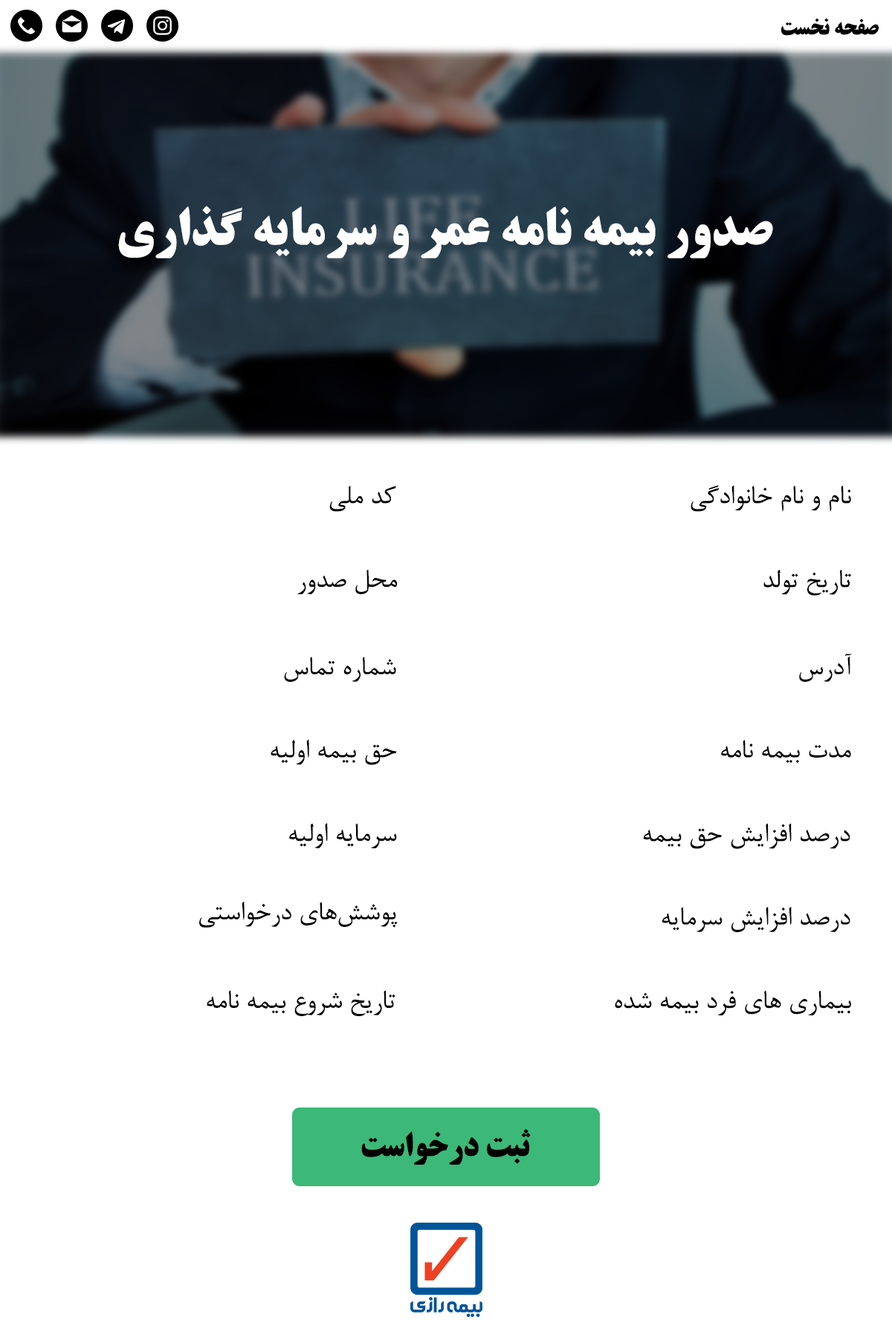
<style>
.page{position:relative;width:892px;height:1337px;background:#ffffff}
.page>*{position:absolute;margin:0}
.t1{font:22.3px "BTitrBold";color:#000000}
.t2{font:52px "BTitrBold";color:#ffffff}
.t3{font:29.7px "BNazanin";color:#000000}
.t4{font:33.4px "BTitrBold";color:#000000}
</style>
<div class="page">
<p class="t1" style="left:781px;top:18px;width:98px;height:18px">صفحه نخست</p>
<p class="t2" style="left:118px;top:206px;width:655px;height:53px">صدور بیمه نامه عمر و سرمایه گذاری</p>
<p class="t3" style="left:329px;top:485px;width:67px;height:27px">کد ملی</p>
<p class="t3" style="left:690px;top:485px;width:161px;height:27px">نام و نام خانوادگی</p>
<p class="t3" style="left:297px;top:569px;width:101px;height:25px">محل صدور</p>
<p class="t3" style="left:763px;top:569px;width:88px;height:27px">تاریخ تولد</p>
<p class="t3" style="left:799px;top:654px;width:52px;height:28px">آدرس</p>
<p class="t3" style="left:284px;top:657px;width:112px;height:25px">شماره تماس</p>
<p class="t3" style="left:270px;top:739px;width:127px;height:26px">حق بیمه اولیه</p>
<p class="t3" style="left:721px;top:740px;width:130px;height:24px">مدت بیمه نامه</p>
<p class="t3" style="left:289px;top:823px;width:108px;height:26px">سرمایه اولیه</p>
<p class="t3" style="left:643px;top:823px;width:207px;height:26px">درصد افزایش حق بیمه</p>
<p class="t3" style="left:199px;top:901px;width:199px;height:27px">پوشش‌های درخواستی</p>
<p class="t3" style="left:662px;top:906px;width:188px;height:26px">درصد افزایش سرمایه</p>
<p class="t3" style="left:207px;top:990px;width:188px;height:26px">تاریخ شروع بیمه نامه</p>
<p class="t3" style="left:614px;top:990px;width:237px;height:26px">بیماری های فرد بیمه شده</p>
<p class="t4" style="left:361px;top:1129px;width:170px;height:36px">ثبت درخواست</p>
</div>
